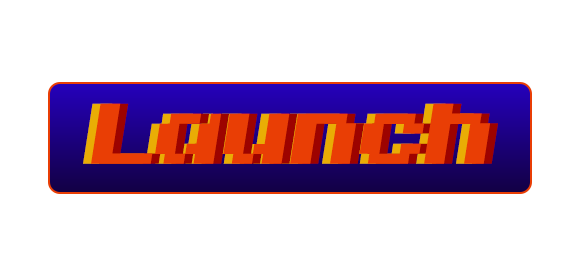
<style>
.page{position:relative;width:579px;height:258px;background:#ffffff}
.page>*{position:absolute;margin:0}
.t1{font:100px "Invasion2000";color:#eaad05}
.t2{font:100px "Invasion2000";color:#ea3e05}
.t3{font:100px "Invasion2000";color:#9e0300}
</style>
<div class="page">
<p class="t1" style="left:83px;top:103px;width:399px;height:61px">Launch</p>
<p class="t2" style="left:91px;top:103px;width:399px;height:61px">Launch</p>
<p class="t3" style="left:99px;top:103px;width:399px;height:61px">Launch</p>
</div>
